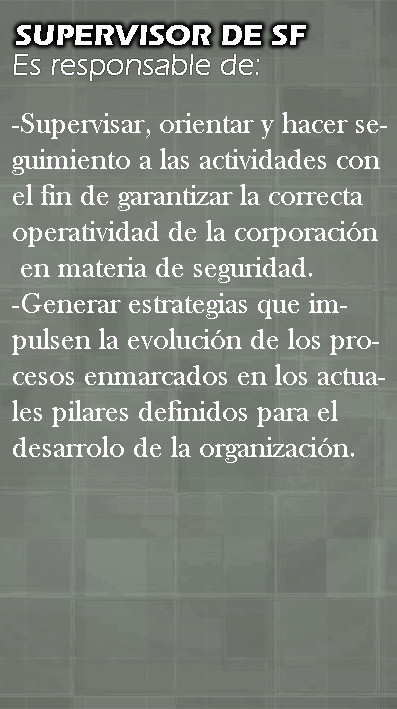
<style>
.page{position:relative;width:397px;height:709px}
.page>*{position:absolute;margin:0}
.t1{font:30px "ErasITC-Bold";color:#ffffff;text-transform:uppercase}
.t2{font:30px "BaskOldFace";color:#ffffff}
</style>
<div class="page">
<p class="t1" style="left:16px;top:25px;width:290px;height:20px">supervisor de sf</p>
<p class="t2" style="left:12px;top:112px;width:375px;height:351px">-Supervisar, orientar y hacer se-<br>guimiento a las actividades con<br>el fin de garantizar la correcta<br>operatividad de la corporación<br> en materia de seguridad.<br>-Generar estrategias que im-<br>pulsen la evolución de los pro-<br>cesos enmarcados en los actua-<br>les pilares definidos para el<br>desarrolo de la organización.</p>
</div>
